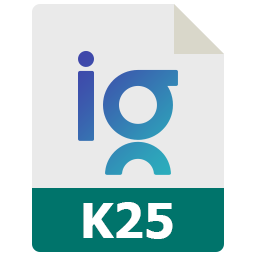
<style>
.page{position:relative;width:256px;height:256px;background:#eaeaea}
.page>*{position:absolute;margin:0}
.t1{font:48px "Tahoma-Bold";color:#ffffff}
</style>
<div class="page">
<p class="t1" style="left:83px;top:202px;width:90px;height:37px">K25</p>
</div>
